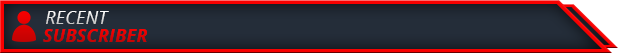
<style>
.page{position:relative;width:618px;height:53px;background:#242d39}
.page>*{position:absolute;margin:0}
.t1{font:17.8px "OpenSans-Italic";letter-spacing:0.02em}
.t2{font:17.8px "OpenSans-BoldItalic";letter-spacing:0.02em}
</style>
<div class="page">
<p class="t1" style="left:46px;top:11px;width:63px;height:13px">RECENT</p>
<p class="t2" style="left:43px;top:29px;width:104px;height:13px">SUBSCRIBER</p>
</div>
